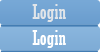
<style>
.page{position:relative;width:100px;height:52px}
.page>*{position:absolute;margin:0}
.t1{font:20px "Rockwell-Condensed";color:#e1e5e9}
.t2{font:20px "Rockwell-Condensed";color:#ffffff}
</style>
<div class="page">
<p class="t1" style="left:32px;top:4px;width:34px;height:18px">Login</p>
<p class="t2" style="left:32px;top:30px;width:34px;height:18px">Login</p>
</div>
